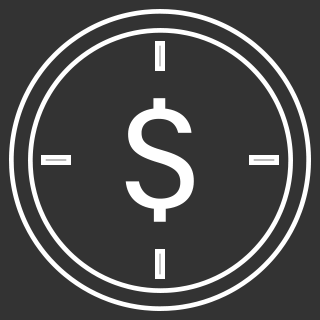
<style>
.page{position:relative;width:320px;height:320px;background:#333333}
.page>*{position:absolute;margin:0}
.t1{font:150px "AcuminConcept-Regular";color:#ffffff}
</style>
<div class="page">
<p class="t1" style="left:125px;top:98px;width:69px;height:124px">$</p>
</div>
